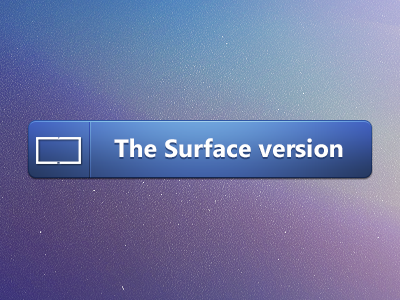
<style>
.page{position:relative;width:400px;height:300px}
.page>*{position:absolute;margin:0}
.t1{font:25px "SegoeUI-Bold";color:#ffffff}
</style>
<div class="page">
<p class="t1" style="left:114px;top:138px;width:229px;height:20px">The Surface version</p>
</div>
